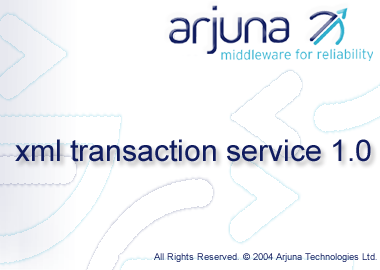
<style>
.page{position:relative;width:380px;height:270px;background:#ffffff}
.page>*{position:absolute;margin:0}
.t1{font:30px "ArialMT";color:#101c5f}
.t2{font:9.5px "ArialMT";color:#142062}
</style>
<div class="page">
<p class="t1" style="left:15px;top:139px;width:356px;height:23px">xml transaction service 1.0</p>
<p class="t2" style="left:154px;top:253px;width:223px;height:9px">All Rights Reserved. © 2004 Arjuna Technologies Ltd.</p>
</div>
